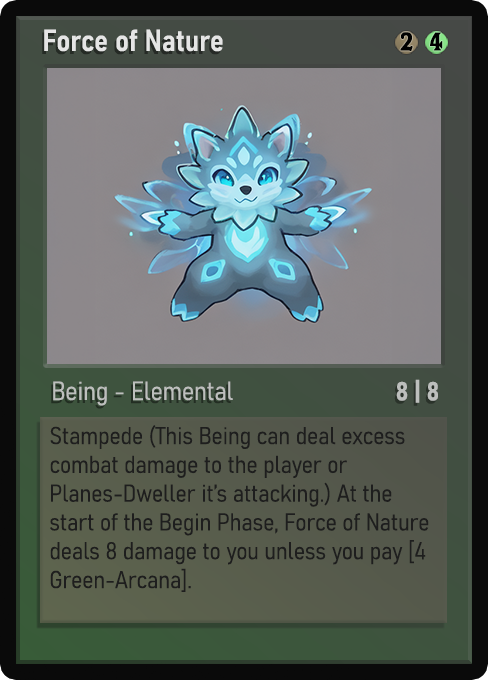
<style>
.page{position:relative;width:488px;height:680px}
.page>*{position:absolute;margin:0}
.t1{font:30px "Bahnschrift-SemiBoldSemiCondensed";color:#f2f2f2;font-weight:bold}
.t2{font:25px "WTRRoycroft";color:#000000;font-weight:bold;scale:1.09 1}
.t3{font:26px "Bahnschrift-LightSemiCondensed";color:#c8c8c8;font-weight:bold}
.t4{font:26px "Bahnschrift-BoldSemiCondensed";color:#bdbfbd;font-weight:bold}
.t5{font:24px "Bahnschrift-LightSemiCondensed";color:#1e1e1e;font-weight:bold}
</style>
<div class="page">
<p class="t1" style="left:44px;top:29px;width:179px;height:23px;opacity:0.9">Force of Nature</p>
<p class="t2" style="left:400px;top:32px;width:13px;height:19px">2</p>
<p class="t2" style="left:430px;top:32px;width:13px;height:19px">4</p>
<p class="t3" style="left:53px;top:381px;width:180px;height:25px;opacity:0.9">Being - Elemental</p>
<p class="t4" style="left:396px;top:379px;width:42px;height:24px">8 | 8</p>
<p class="t5" style="left:50px;top:425px;width:379px;height:167px">Stampede (This Being can deal excess combat damage to the player or Planes-Dweller it’s attacking.) At the start of the Begin Phase, Force of Nature deals 8 damage to you unless you pay [4 Green-Arcana].</p>
</div>
